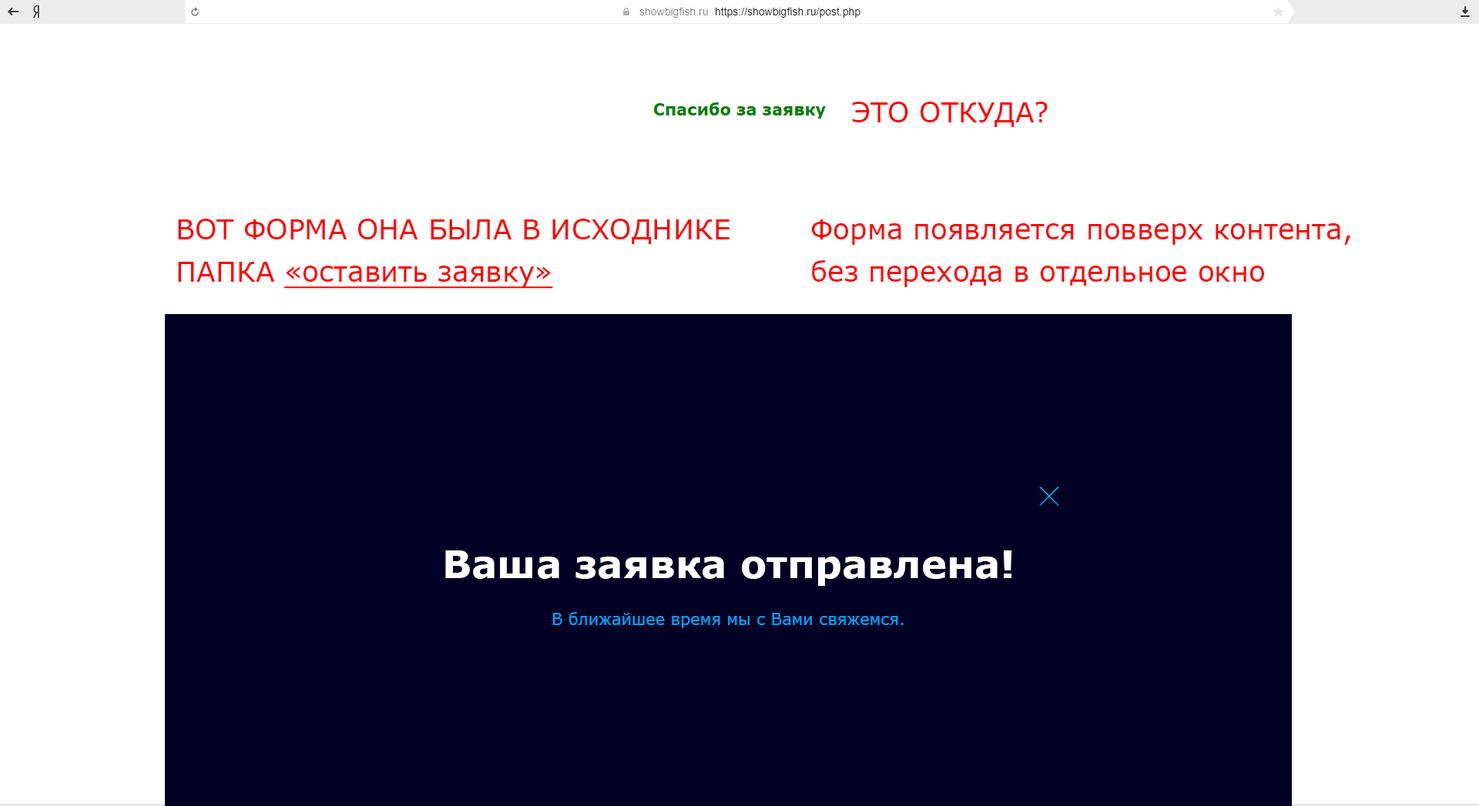
<style>
.page{position:relative;width:1479px;height:806px;background:#ffffff}
.page>*{position:absolute;margin:0}
.t1{font:27.7px "Verdana";color:#ff0000}
.t2{font:27.7px "Verdana";color:#ff0000;text-decoration:underline}
.t3{font:38.5px "Verdana-Bold";color:#ffffff}
.t4{font:16.2px "Verdana";color:#00a1ff}
</style>
<div class="page">
<p class="t1" style="left:852px;top:102px;width:195px;height:25px">ЭТО ОТКУДА?</p>
<p class="t1" style="left:178px;top:219px;width:551px;height:70px">ВОТ ФОРМА ОНА БЫЛА В ИСХОДНИКЕ<br>ПАПКА <span class="t2">«оставить заявку»</span></p>
<p class="t1" style="left:811px;top:220px;width:539px;height:67px">Форма появляется повверх контента,<br>без перехода в отдельное окно</p>
<p class="t3" style="left:445px;top:551px;width:567px;height:35px">Ваша заявка отправлена!</p>
<p class="t4" style="left:552px;top:612px;width:351px;height:16px">В ближайшее время мы с Вами свяжемся.</p>
</div>
